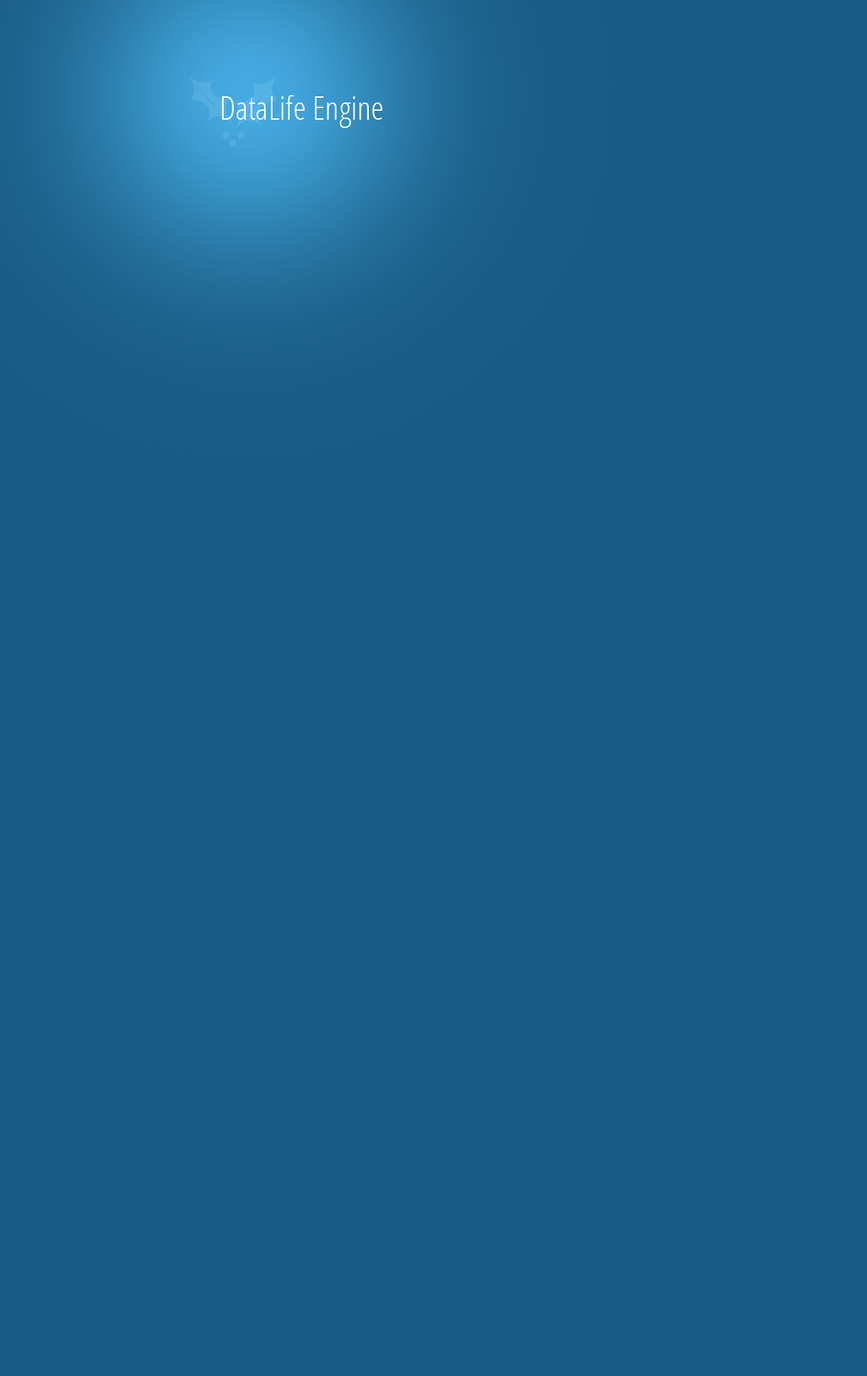
<style>
.page{position:relative;width:867px;height:1376px;background:#185c83}
.page>*{position:absolute;margin:0}
.t1{font:33px "OpenSans-CondensedLight";color:#ffffff}
</style>
<div class="page">
<p class="t1" style="left:221px;top:95px;width:161px;height:33px">DataLife Engine</p>
</div>
